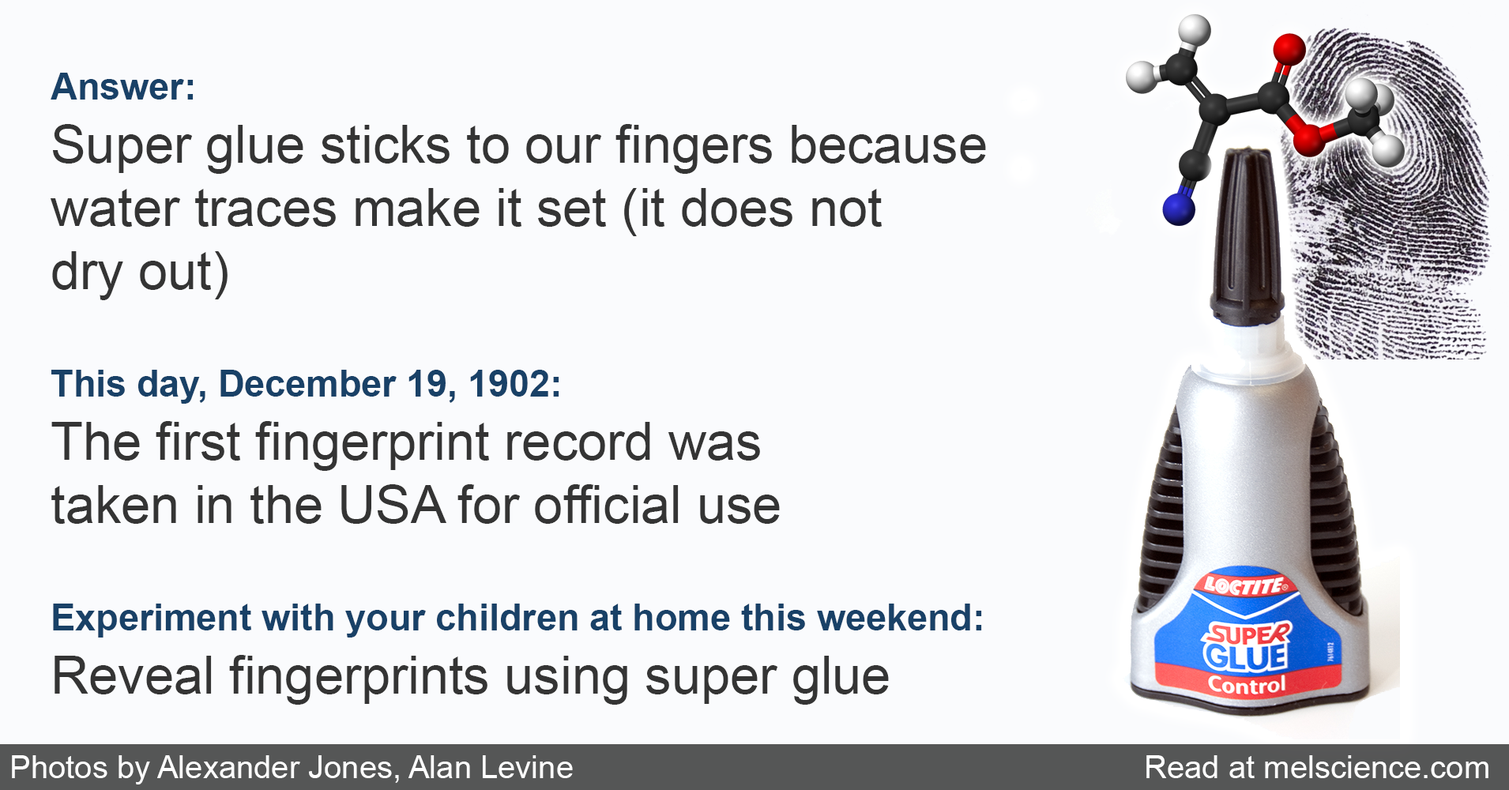
<style>
.page{position:relative;width:1509px;height:790px;background:#fafbfd}
.page>*{position:absolute;margin:0}
.t1{font:52.7px "ArialMT";color:#343434}
.t2{font:36.9px "Arial-BoldMT";color:#194167}
.t3{font:31.6px "ArialMT";color:#ffffff}
</style>
<div class="page">
<p class="t1" style="left:51px;top:73px;width:935px;height:632px"><span class="t2">Answer:<br></span>Super glue sticks to our fingers because<br>water traces make it set (it does not <br>dry out)<br><br><span class="t2">This day, December 19, 1902:<br></span>The first fingerprint record was <br>taken in the USA for official use<br><br><span class="t2">Experiment with your children at home this weekend:<br></span>Reveal fingerprints using super glue</p>
<p class="t3" style="left:12px;top:755px;width:561px;height:30px">Photos by Alexander Jones, Alan Levine</p>
<p class="t3" style="left:1146px;top:755px;width:343px;height:23px">Read at melscience.com</p>
</div>
